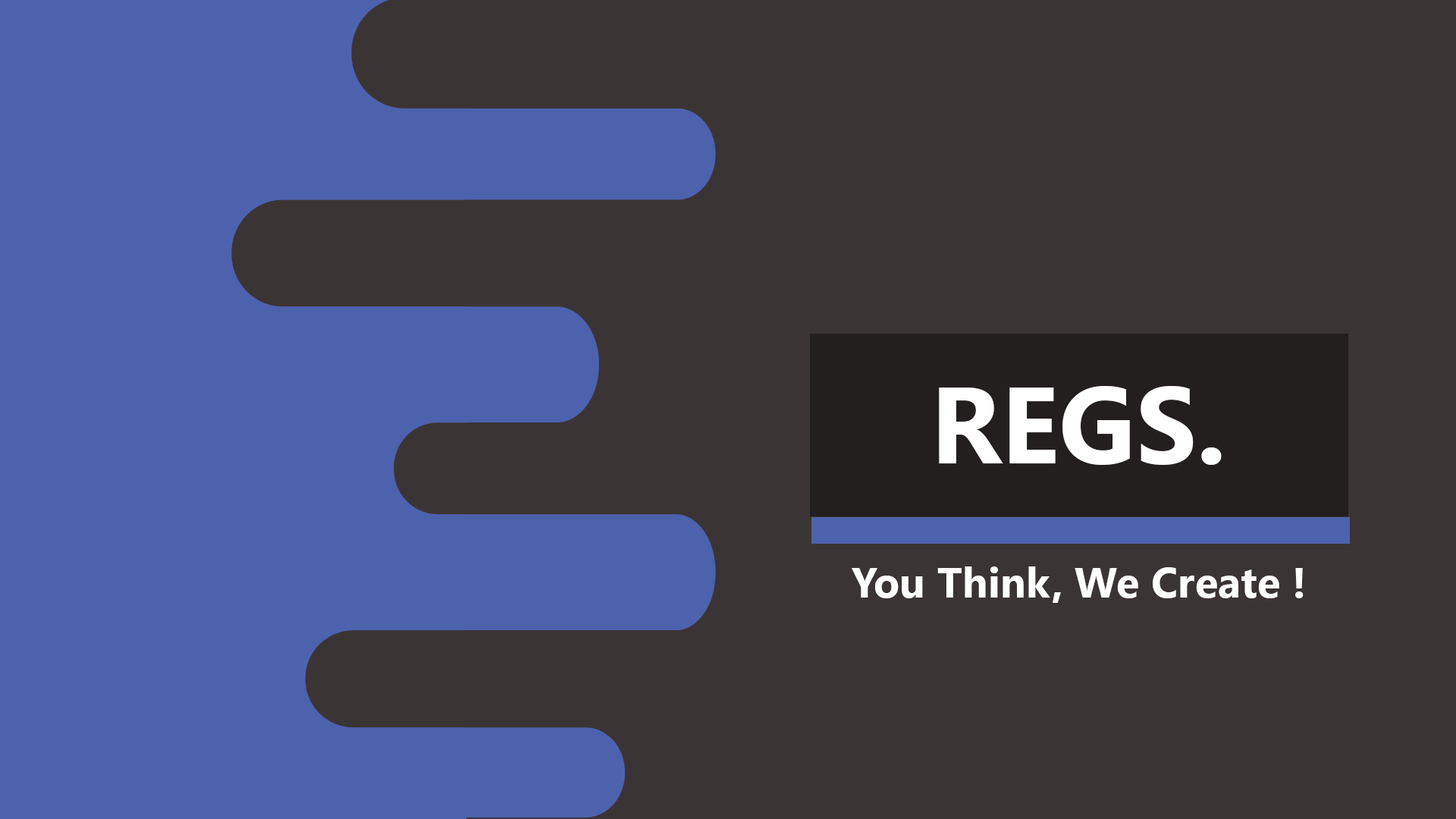
<style>
.page{position:relative;width:1456px;height:819px;background:#3b3434}
.page>*{position:absolute;margin:0}
.t1{font:108.1px "SegoeUI-Bold";color:#ffffff}
.t2{font:42.7px "SegoeUI-Bold";color:#ffffff}
</style>
<div class="page">
<p class="t1" style="left:939px;top:386px;width:283px;height:79px">REGS.</p>
<p class="t2" style="left:852px;top:566px;width:452px;height:37px">You Think, We Create !</p>
</div>
